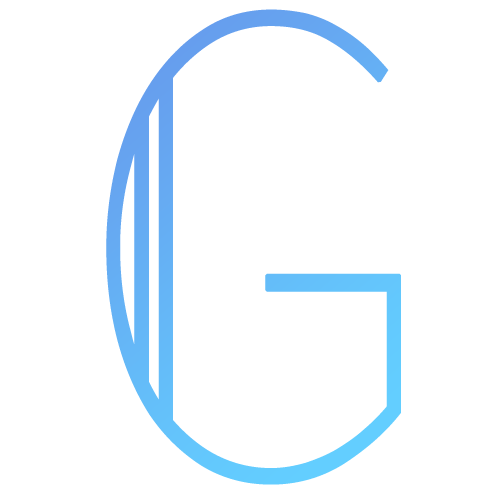
<style>
.page{position:relative;width:504px;height:504px;background:#ffffff}
.page>*{position:absolute;margin:0}
.t1{font:540.1px "HazelDecoLight-Regular";letter-spacing:-0.15em;color:#65b3f5;font-weight:bold;scale:0.91 1}
</style>
<div class="page">
<p class="t1" style="left:106px;top:9px;width:295px;height:476px">g</p>
</div>
